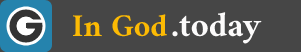
<style>
.page{position:relative;width:301px;height:52px;background:#464646}
.page>*{position:absolute;margin:0}
.t1{font:32px "Amiri-Bold";color:#fcba04}
.t2{font:35px "Amiri-Bold";color:#fcfbfb}
</style>
<div class="page">
<p class="t1" style="left:73px;top:14px;width:94px;height:23px">In God</p>
<p class="t2" style="left:172px;top:12px;width:90px;height:32px">.today</p>
</div>
